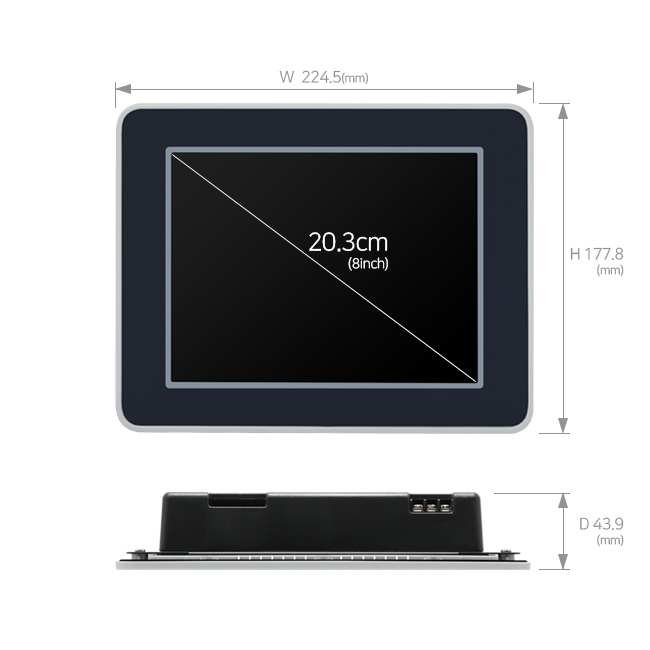
<style>
.page{position:relative;width:650px;height:650px;background:#ffffff}
.page>*{position:absolute;margin:0}
.t1{font:16px "NanumSquareR";letter-spacing:-0.03em;color:#939393}
.t2{font:12px "NanumSquareR";letter-spacing:-0.03em;color:#939393}
.t3{font:14px/18px "NanumSquareR";letter-spacing:-0.03em;color:#ffffff}
.t4{font:25px/18px "NanumSquareR";letter-spacing:-0.03em;color:#ffffff}
.t5{font:16px/15px "NanumSquareR";letter-spacing:-0.03em;color:#939393}
.t6{font:12px/15px "NanumSquareR";letter-spacing:-0.03em;color:#939393}
</style>
<div class="page">
<p class="t1" style="left:279px;top:70px;width:89px;height:15px">W  224.5<span class="t2">(mm)</span></p>
<p class="t3" style="left:309px;top:232px;width:79px;height:39px;text-align:right"><span class="t4">20.3cm<br></span>(8inch)</p>
<p class="t5" style="left:570px;top:247px;width:54px;height:30px;text-align:right">H 177.8<br><span class="t6">(mm)</span></p>
<p class="t5" style="left:580px;top:517px;width:44px;height:30px;text-align:right">D 43.9<br><span class="t6">(mm)</span></p>
</div>
